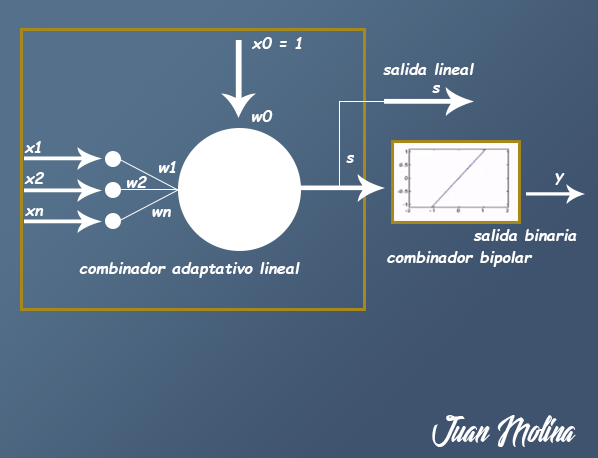
<style>
.page{position:relative;width:598px;height:458px}
.page>*{position:absolute;margin:0}
.t1{font:16px "ComicSansMS-BoldItalic";color:#ffffff}
.t2{font:50px "Lights-of-the-Stardust";color:#ffffff}
</style>
<div class="page">
<p class="t1" style="left:252px;top:37px;width:50px;height:12px">x0 = 1</p>
<p class="t1" style="left:383px;top:63px;width:91px;height:12px">salida lineal</p>
<p class="t1" style="left:432px;top:85px;width:8px;height:8px">s</p>
<p class="t1" style="left:252px;top:110px;width:21px;height:12px">w0</p>
<p class="t1" style="left:24px;top:141px;width:17px;height:12px">x1</p>
<p class="t1" style="left:159px;top:161px;width:17px;height:12px">w1</p>
<p class="t1" style="left:346px;top:155px;width:8px;height:8px">s</p>
<p class="t1" style="left:24px;top:172px;width:21px;height:12px">x2</p>
<p class="t1" style="left:555px;top:173px;width:10px;height:12px">y</p>
<p class="t1" style="left:127px;top:176px;width:20px;height:12px">w2</p>
<p class="t1" style="left:25px;top:208px;width:19px;height:8px">xn</p>
<p class="t1" style="left:152px;top:209px;width:19px;height:8px">wn</p>
<p class="t1" style="left:473px;top:229px;width:104px;height:12px">salida binaria</p>
<p class="t1" style="left:387px;top:251px;width:146px;height:16px">combinador bipolar</p>
<p class="t1" style="left:79px;top:262px;width:221px;height:16px">combinador adaptativo lineal</p>
<p class="t2" style="left:432px;top:415px;width:144px;height:32px">Juan Molina</p>
</div>
